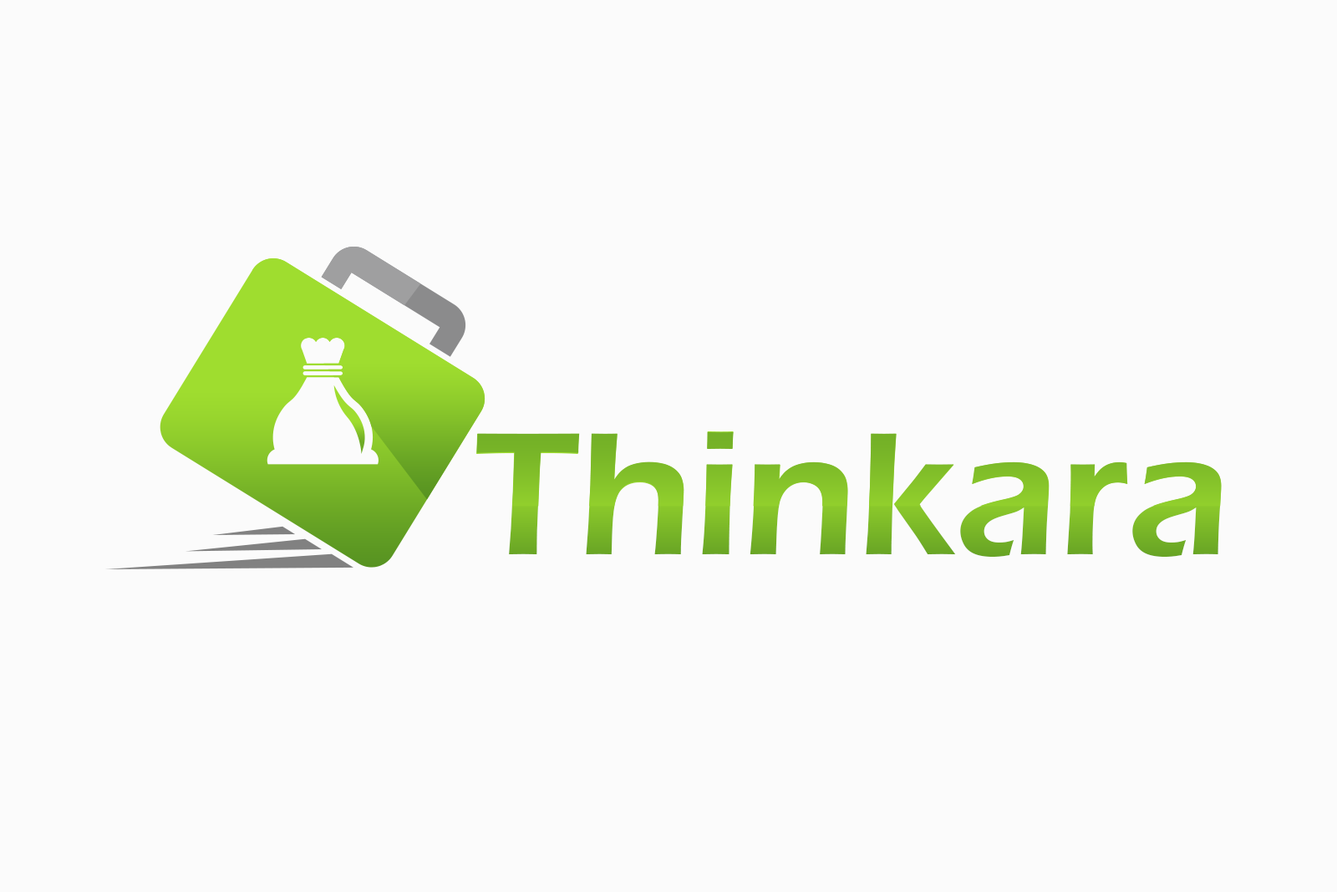
<style>
.page{position:relative;width:1337px;height:892px;background:#fbfbfb}
.page>*{position:absolute;margin:0}
.t1{font:180.8px "ErasITC-Demi";color:#80bd29}
</style>
<div class="page">
<p class="t1" style="left:476px;top:430px;width:746px;height:127px">Thinkara</p>
</div>
